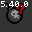
<style>
.page{position:relative;width:32px;height:32px;background:#333333}
.page>*{position:absolute;margin:0}
.t1{font:9px "Consolas";letter-spacing:-0.038em;color:#ffffff}
.t2{font:9px "Consolas";letter-spacing:0.1em;color:#ffffff}
</style>
<div class="page">
<p class="t1" style="left:1px;top:1px;width:27px;height:6px">5.<span class="t2">4</span>0.0</p>
</div>
